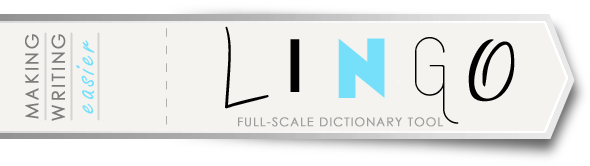
<style>
.page{position:relative;width:590px;height:166px;background:#f5f3f0}
.page>*{position:absolute;margin:0}
.t1{font:69.3px "DJBCLyleRun";letter-spacing:-0.005em;color:#000000}
.t2{font:18px "CenturyGothic";letter-spacing:0.11em;color:#7c7c7c;font-weight:bold}
.t3{font:36px "FreestyleScript-Regular";letter-spacing:0.1em;color:#76e0fa}
.t4{font:99.1px "Telegrafico";letter-spacing:-0.005em;color:#000000}
.t5{font:85px "Minotaur-Phatte";letter-spacing:-0.005em;color:#76e0fa}
.t6{font:73.6px "LemurLightDEMO";letter-spacing:-0.005em;color:#000000}
.t7{font:85px "Commercial-Script";letter-spacing:-0.005em;color:#000000}
.t8{font:12px "CenturyGothic";letter-spacing:0.075em;color:#9d9e9e;font-weight:bold}
</style>
<div class="page">
<p class="t1" style="left:225px;top:26px;width:44px;height:83px">L</p>
<p class="t2" style="left:25px;top:34px;width:14px;height:85px;rotate:-90deg">MAKING</p>
<p class="t2" style="left:51px;top:34px;width:15px;height:87px;rotate:-90deg">WRITING</p>
<p class="t3" style="left:76px;top:40px;width:19px;height:74px;rotate:-90deg">easier</p>
<p class="t4" style="left:290px;top:39px;width:10px;height:53px">I</p>
<p class="t5" style="left:338px;top:38px;width:47px;height:60px">N</p>
<p class="t6" style="left:415px;top:37px;width:44px;height:87px">G</p>
<p class="t7" style="left:468px;top:39px;width:47px;height:63px">O</p>
<p class="t8" style="left:238px;top:117px;width:205px;height:10px">FULL-SCALE DICTIONARY TOOL</p>
</div>
